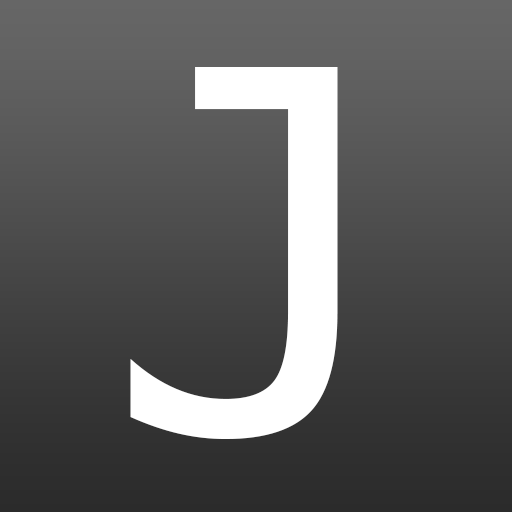
<style>
.page{position:relative;width:512px;height:512px}
.page>*{position:absolute;margin:0}
.t1{font:500px "Menlo-Regular";color:#ffffff}
</style>
<div class="page">
<p class="t1" style="left:130px;top:67px;width:208px;height:372px">J</p>
</div>
